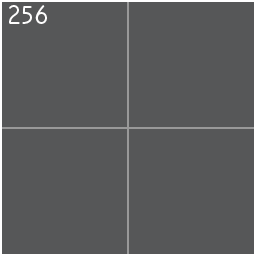
<style>
.page{position:relative;width:256px;height:256px;background:#565758}
.page>*{position:absolute;margin:0}
.t1{font:24px "OCR-B-Regular";letter-spacing:-0.075em;color:#fefefe}
</style>
<div class="page">
<p class="t1" style="left:9px;top:5px;width:38px;height:19px">256</p>
</div>
